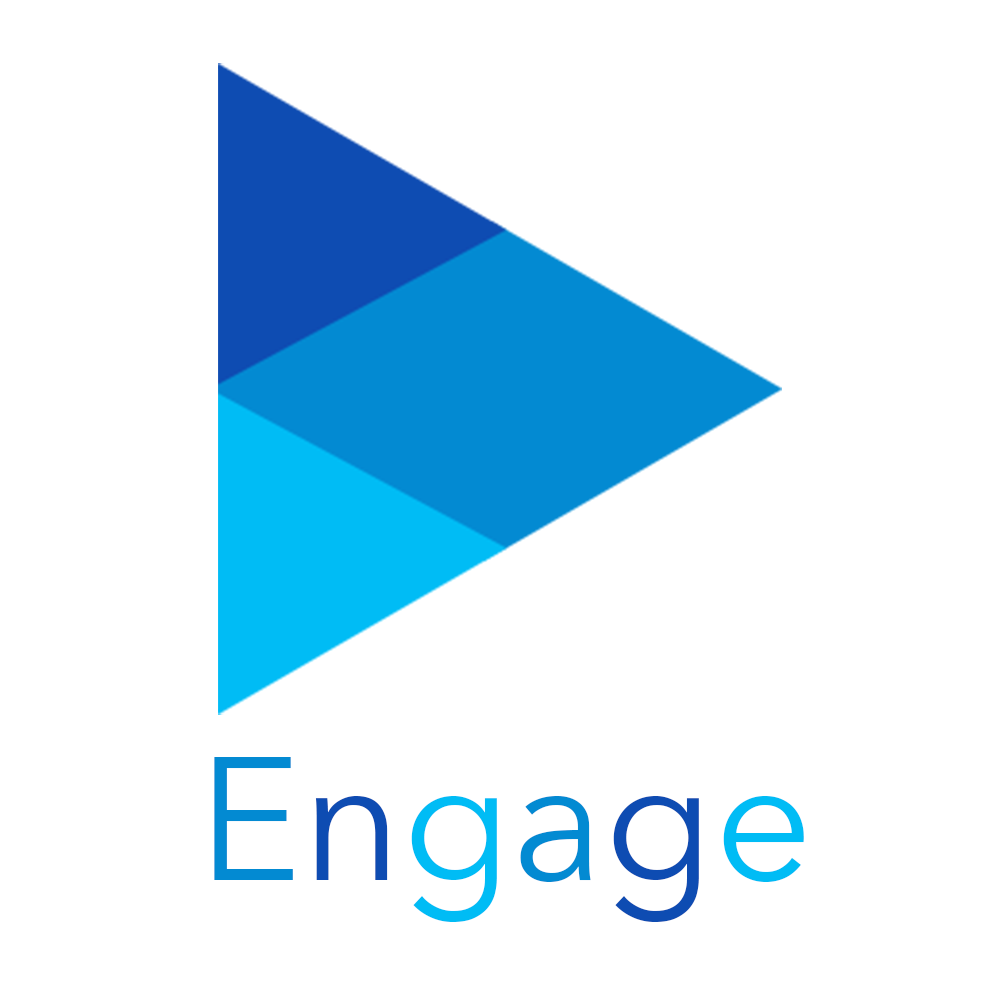
<style>
.page{position:relative;width:1000px;height:1000px;background:#ffffff}
.page>*{position:absolute;margin:0}
.t1{font:173.7px "AvenirNext-Regular";color:#038ad2}
.t2{font:173.7px "AvenirNext-Regular";color:#0e4cb2}
.t3{font:173.7px "AvenirNext-Regular";color:#00bcf5}
</style>
<div class="page">
<p class="t1" style="left:214px;top:757px;width:590px;height:165px">E<span class="t2">n</span><span class="t3">g</span>a<span class="t2">g</span><span class="t3">e</span></p>
</div>
